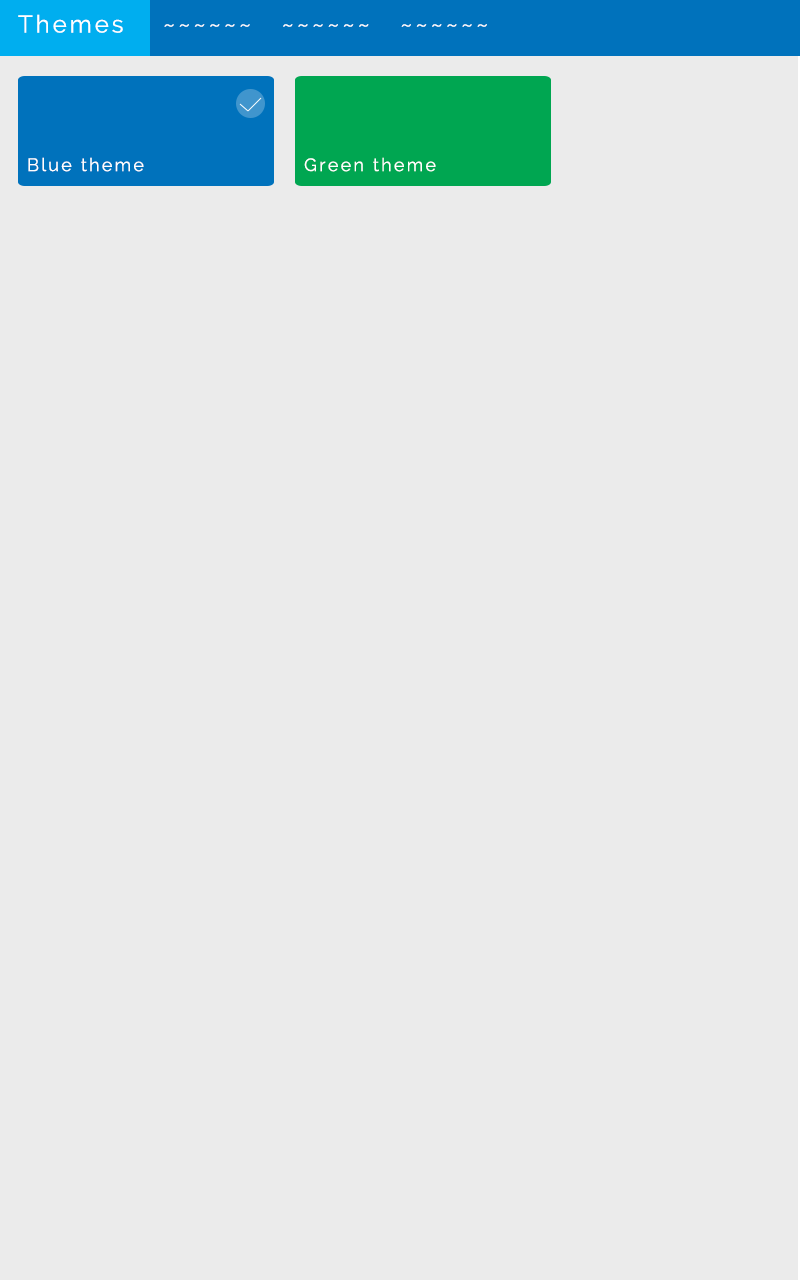
<style>
.page{position:relative;width:800px;height:1280px;background:#ebebeb}
.page>*{position:absolute;margin:0}
.t1{font:24px "Raleway";letter-spacing:0.125em;color:#ffffff}
.t2{font:18px "Raleway";letter-spacing:0.125em;color:#ffffff}
</style>
<div class="page">
<p class="t1" style="left:18px;top:14px;width:469px;height:19px">Themes    ~~~~~~   ~~~~~~   ~~~~~~</p>
<p class="t2" style="left:28px;top:157px;width:116px;height:15px">Blue theme</p>
<p class="t2" style="left:304px;top:157px;width:132px;height:15px">Green theme</p>
</div>
